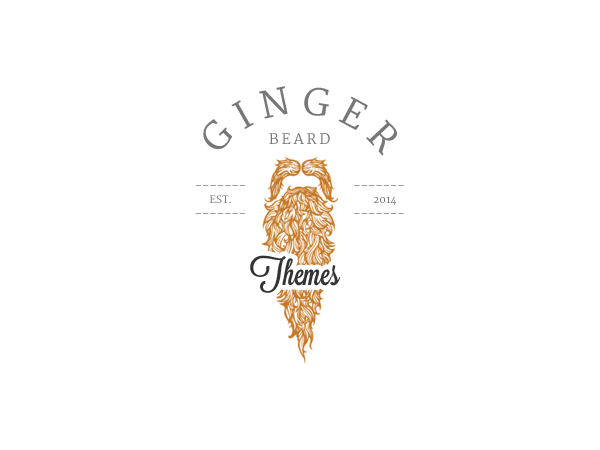
<style>
.page{position:relative;width:600px;height:450px;background:#ffffff}
.page>*{position:absolute;margin:0}
.t1{font:12.1px "Merriweather";color:#777777}
.t2{font:36.4px "Merriweather";letter-spacing:0.25em;color:#777777}
.t3{font:14.1px "Merriweather";letter-spacing:0.2em;color:#777777}
.t4{font:12.1px "Merriweather"}
.t5{font:10.1px "Merriweather";color:#777777}
.t6{font:33.3px "Lavanderia-Sturdy";color:#333333}
</style>
<div class="page">
<p class="t1" style="left:203px;top:86px;width:194px;height:70px;rotate:-45deg"><span class="t2">GINGER   </span>__________________________________________________</p>
<p class="t3" style="left:269px;top:133px;width:61px;height:11px">BEARD</p>
<p class="t4" style="left:195px;top:185px;width:50px;height:1px">-------</p>
<p class="t4" style="left:354px;top:185px;width:50px;height:1px">-------</p>
<p class="t5" style="left:210px;top:195px;width:21px;height:8px">EST.</p>
<p class="t5" style="left:374px;top:196px;width:23px;height:9px">2014</p>
<p class="t4" style="left:195px;top:213px;width:50px;height:1px">-------</p>
<p class="t4" style="left:354px;top:213px;width:50px;height:1px">-------</p>
<p class="t6" style="left:250px;top:255px;width:91px;height:38px">Themes</p>
</div>
